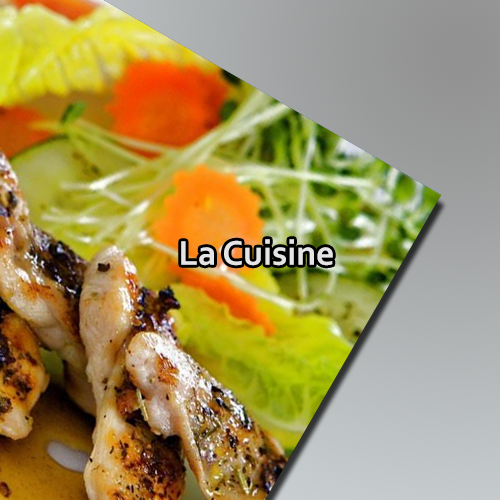
<style>
.page{position:relative;width:500px;height:500px}
.page>*{position:absolute;margin:0}
.t1{font:35.9px "Corbel-Bold";color:#e5e5e5}
</style>
<div class="page">
<p class="t1" style="left:181px;top:239px;width:152px;height:27px">La Cuisine</p>
</div>
